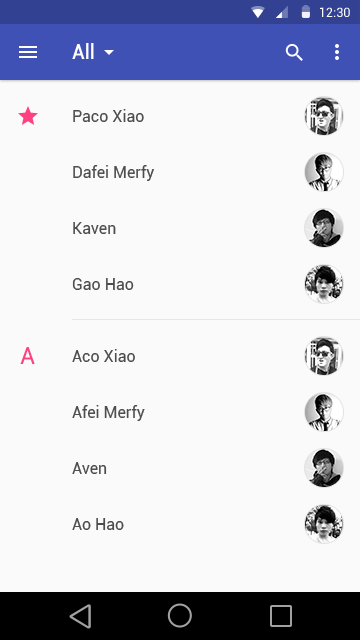
<style>
.page{position:relative;width:360px;height:640px;background:#fafafa}
.page>*{position:absolute;margin:0}
.t1{font:12.7px "Roboto-Regular";color:#ffffff}
.t2{font:20px "Roboto-Medium";color:#ffffff}
.t3{font:16px "Roboto-Regular";color:#4d4d4d}
.t4{font:24px "Roboto-Regular";color:#ff4081}
</style>
<div class="page">
<p class="t1" style="left:320px;top:7px;width:30px;height:10px">12:30</p>
<p class="t2" style="left:72px;top:43px;width:22px;height:16px">All</p>
<p class="t3" style="left:73px;top:109px;width:71px;height:13px">Paco Xiao</p>
<p class="t3" style="left:73px;top:165px;width:81px;height:16px">Dafei Merfy</p>
<p class="t3" style="left:73px;top:222px;width:43px;height:12px">Kaven</p>
<p class="t3" style="left:72px;top:278px;width:62px;height:12px">Gao Hao</p>
<p class="t4" style="left:20px;top:347px;width:15px;height:17px">A</p>
<p class="t3" style="left:72px;top:349px;width:63px;height:13px">Aco Xiao</p>
<p class="t3" style="left:72px;top:405px;width:73px;height:16px">Afei Merfy</p>
<p class="t3" style="left:72px;top:462px;width:35px;height:12px">Aven</p>
<p class="t3" style="left:72px;top:518px;width:52px;height:12px">Ao Hao</p>
</div>
